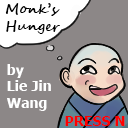
<style>
.page{position:relative;width:128px;height:128px;background:#8c8787}
.page>*{position:absolute;margin:0}
.t1{font:14px "SegoeScript-Bold";color:#000000}
.t2{font:14px "Tahoma-Bold";color:#ffffff}
.t3{font:14px "Tahoma-Bold";color:#ff0000}
</style>
<div class="page">
<p class="t1" style="left:5px;top:3px;width:55px;height:31px">Monk’s<br>Hunger</p>
<p class="t2" style="left:7px;top:64px;width:44px;height:47px">by<br>Lie Jin <br>Wang</p>
<p class="t3" style="left:65px;top:116px;width:60px;height:10px">PRESS N</p>
</div>
